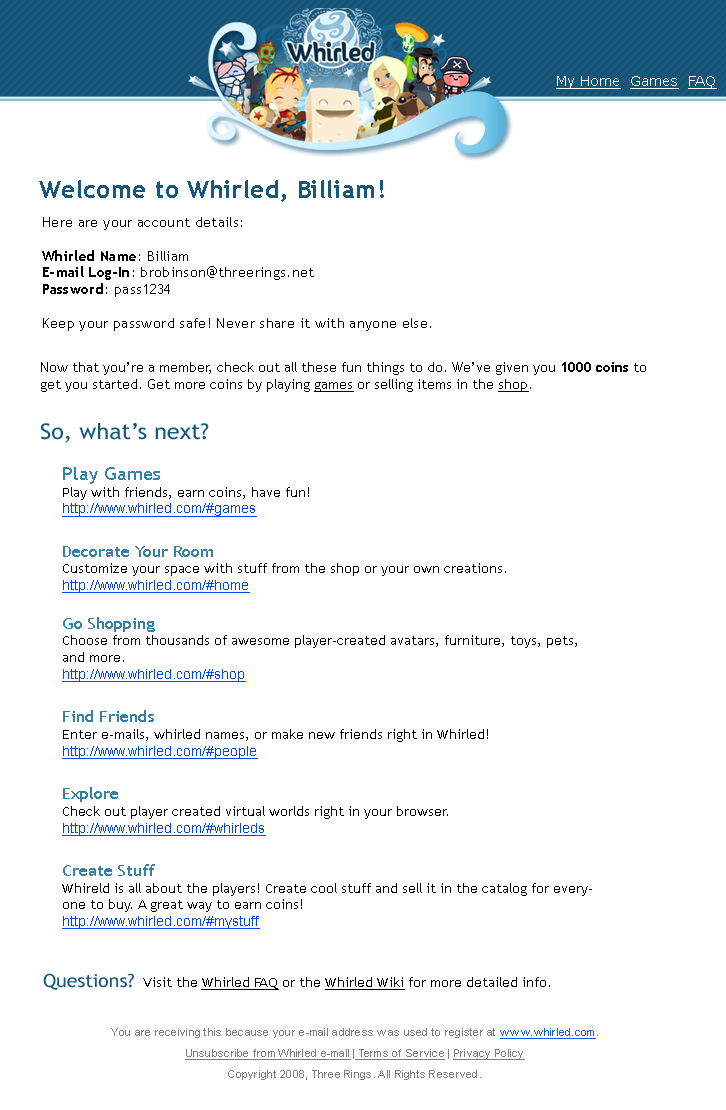
<style>
.page{position:relative;width:726px;height:1110px;background:#ffffff}
.page>*{position:absolute;margin:0}
.t1{font:13.7px "Verdana";color:#fefefe;text-decoration:underline}
.t2{font:24px "TrebuchetMS-Bold";letter-spacing:0.025em;color:#16587e}
.t3{font:14px "TrebuchetMS";letter-spacing:0.025em;color:#000000}
.t4{font:14px "TrebuchetMS-Bold";letter-spacing:0.025em;color:#000000}
.t5{font:13.7px "TrebuchetMS";color:#000000}
.t6{font:23.5px "TrebuchetMS-Bold";color:#000000}
.t7{font:13.7px "TrebuchetMS-Bold";color:#000000}
.t8{font:13.7px "TrebuchetMS";color:#000000;text-decoration:underline}
.t9{font:21.8px "TrebuchetMS";color:#16587e;scale:1.07 1}
.t10{font:12.7px "TrebuchetMS";color:#000000;scale:1.07 1}
.t11{font:18.2px "TrebuchetMS";color:#3581aa;scale:1.07 1}
.t12{font:12.7px "ArialMT";color:#0042ff;text-decoration:underline;scale:1.07 1}
.t13{font:16.4px "TrebuchetMS";color:#3581aa;scale:1.07 1}
.t14{font:18.2px "TrebuchetMS";color:#16587e;scale:1.07 1}
.t15{font:12.7px "TrebuchetMS";color:#000000;text-decoration:underline;scale:1.07 1}
.t16{font:11px/21px "ArialMT";letter-spacing:0.025em;color:#7b7c7c}
.t17{font:11px/21px "ArialMT";letter-spacing:0.025em;color:#0f58ff;text-decoration:underline}
.t18{font:11px/21px "ArialMT";letter-spacing:0.025em;color:#7b7c7c;text-decoration:underline}
</style>
<div class="page">
<p class="t1" style="left:556px;top:76px;width:161px;height:13px">My Home  Games  FAQ</p>
<p class="t2" style="left:39px;top:180px;width:345px;height:22px">Welcome to Whirled, Billiam!</p>
<p class="t3" style="left:42px;top:217px;width:389px;height:114px">Here are your account details:<br><br><span class="t4">Whirled Name</span>: Billiam<br><span class="t4">E-mail Log-In</span>: brobinson@threerings.net<br><span class="t4">Password</span>: pass1234<br><br>Keep your password safe! Never share it with anyone else.</p>
<p class="t5" style="left:41px;top:362px;width:605px;height:30px"><span class="t6"><br></span>Now that you’re a member, check out all these fun things to do. We’ve given you <span class="t7">1000 coins</span> to get you started. Get more coins by playing <span class="t8">games</span> or selling items in the <span class="t8">shop</span>.</p>
<p class="t9" style="left:41px;top:423px;width:168px;height:20px">So, what’s next?</p>
<p class="t10" style="left:62px;top:467px;width:530px;height:462px"><span class="t11">Play Games<br></span>Play with friends, earn coins, have fun!<br><span class="t12">http://www.whirled.com/#games<br></span><span class="t13"><br>Decorate Your Room<br></span>Customize your space with stuff from the shop or your own creations.<br><span class="t12">http://www.whirled.com/#home<br><br></span><span class="t13">Go Shopping<br></span>Choose from thousands of awesome player-created avatars, furniture, toys, pets, and more.<br><span class="t12">http://www.whirled.com/#shop<br></span><span class="t13"><br>Find Friends<br></span>Enter e-mails, whirled names, or make new friends right in Whirled!<br><span class="t12">http://www.whirled.com/#people<br></span><span class="t13"><br>Explore<br></span>Check out player created virtual worlds right in your browser.<br><span class="t12">http://www.whirled.com/#whirleds<br></span><span class="t13"><br>Create Stuff<br></span>Whireld is all about the players! Create cool stuff and sell it in the catalog for everyone to buy. A great way to earn coins!<br><span class="t12">http://www.whirled.com/#mystuff</span></p>
<p class="t14" style="left:43px;top:973px;width:91px;height:17px">Questions?</p>
<p class="t10" style="left:143px;top:977px;width:407px;height:13px">Visit the <span class="t15">Whirled FAQ</span> or the <span class="t15">Whirled Wiki</span> for more detailed info.</p>
<p class="t16" style="left:111px;top:1028px;width:487px;height:52px;text-align:center">You are receiving this because your e-mail address was used to register at <span class="t17">www.whirled.com</span>.<br><span class="t18">Unsubscribe from Whirled e-mail</span> |<span class="t18"> Terms of Service</span> | <span class="t18">Privacy Policy<br></span>Copyright 2008, Three Rings. All Rights Reserved.</p>
</div>
